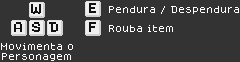
<style>
.page{position:relative;width:240px;height:62px;background:#333333}
.page>*{position:absolute;margin:0}
.t1{font:8px "Dogica_Pixel";color:#ffffff}
</style>
<div class="page">
<p class="t1" style="left:109px;top:6px;width:130px;height:8px">Pendura / Despendura</p>
<p class="t1" style="left:109px;top:25px;width:64px;height:7px">Rouba item</p>
<p class="t1" style="left:1px;top:43px;width:72px;height:18px;text-align:center">Movimenta o<br>Personagem</p>
</div>
